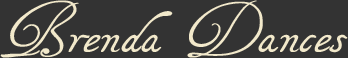
<style>
.page{position:relative;width:348px;height:58px;background:#333333}
.page>*{position:absolute;margin:0}
.t1{font:40px "Tagettes";color:#f2e9cb;scale:1.2 1}
</style>
<div class="page">
<p class="t1" style="left:0px;top:0px;width:348px;height:58px">Brenda Dances</p>
</div>
